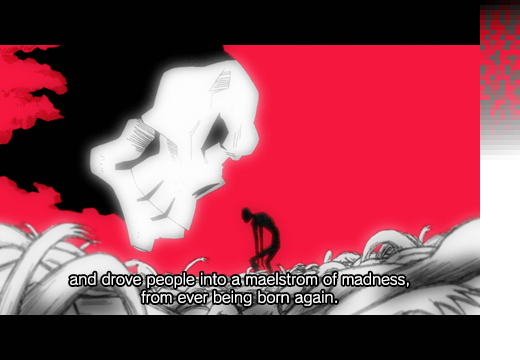
<style>
.page{position:relative;width:520px;height:360px;background:#010101}
.page>*{position:absolute;margin:0}
.t1{font:15px "RodinNTLGPro-M";color:#ffffff}
</style>
<div class="page">
<p class="t1" style="left:70px;top:272px;width:339px;height:34px;text-align:center">and drove people into a maelstrom of madness,<br>from ever being born again.</p>
</div>
